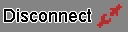
<style>
.page{position:relative;width:128px;height:32px;background:#848484}
.page>*{position:absolute;margin:0}
.t1{font:18px "ArialMT";color:#010101}
</style>
<div class="page">
<p class="t1" style="left:4px;top:9px;width:87px;height:13px">Disconnect</p>
</div>
